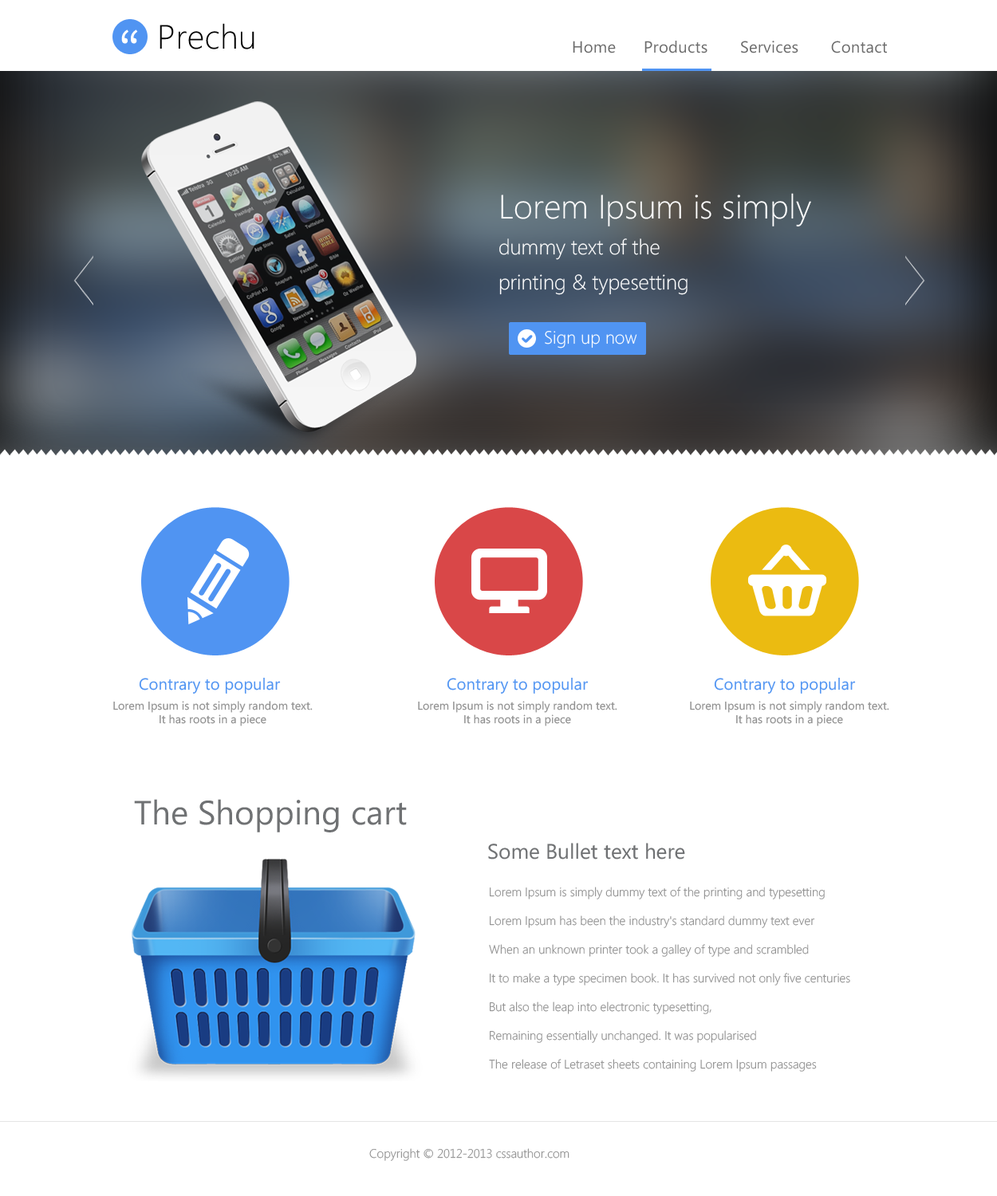
<style>
.page{position:relative;width:997px;height:1196px;background:#ffffff}
.page>*{position:absolute;margin:0}
.t1{font:51.3px "SourceSansPro-Regular";letter-spacing:0.01em;color:#ffffff}
.t2{font:33.8px "SegoeWP-Light";letter-spacing:0.01em;color:#000000}
.t3{font:16.2px "SegoeWPN";letter-spacing:0.01em;color:#6c6c6c}
.t4{font:21px/35.4px "SegoeWP-Light";color:#ffffff}
.t5{font:33.8px/35.4px "SegoeWP-Light";color:#ffffff}
.t6{font:17.8px "SegoeWP-Light";color:#ffffff}
.t7{font:16.2px "SegoeWPN";color:#5094f2}
.t8{font:11.4px "SegoeWPN";color:#909090}
.t9{font:33.8px "SegoeWPN";color:#6f7173}
.t10{font:21px "SegoeWPN";color:#6f7173}
.t11{font:12.2px/28.7px "SegoeWPN-Light";color:#909090}
.t12{font:12.2px "SegoeWPN-Light";color:#909090}
</style>
<div class="page">
<p class="t1" style="left:121px;top:30px;width:17px;height:14px">“</p>
<p class="t2" style="left:159px;top:23px;width:95px;height:26px">Prechu</p>
<p class="t3" style="left:573px;top:41px;width:314px;height:12px">Home      Products       Services       Contact</p>
<p class="t4" style="left:499px;top:193px;width:312px;height:102px"><span class="t5">Lorem Ipsum is simply <br></span>dummy text of the <br>printing &amp; typesetting</p>
<p class="t6" style="left:545px;top:331px;width:92px;height:17px">Sign up now</p>
<p class="t7" style="left:139px;top:678px;width:142px;height:16px">Contrary to popular</p>
<p class="t7" style="left:447px;top:678px;width:142px;height:16px">Contrary to popular</p>
<p class="t7" style="left:714px;top:678px;width:142px;height:16px">Contrary to popular</p>
<p class="t8" style="left:113px;top:701px;width:200px;height:25px;text-align:center">Lorem Ipsum is not simply random text. It has roots in a piece</p>
<p class="t8" style="left:418px;top:701px;width:199px;height:25px;text-align:center">Lorem Ipsum is not simply random text. It has roots in a piece</p>
<p class="t8" style="left:690px;top:701px;width:199px;height:25px;text-align:center">Lorem Ipsum is not simply random text. It has roots in a piece</p>
<p class="t9" style="left:134px;top:799px;width:273px;height:34px">The Shopping cart</p>
<p class="t10" style="left:488px;top:843px;width:197px;height:17px">Some Bullet text here</p>
<p class="t11" style="left:489px;top:887px;width:361px;height:185px">Lorem Ipsum is simply dummy text of the printing and typesetting <br>Lorem Ipsum has been the industry's standard dummy text ever <br>When an unknown printer took a galley of type and scrambled <br>It to make a type specimen book. It has survived not only five centuries<br>But also the leap into electronic typesetting,<br>Remaining essentially unchanged. It was popularised <br>The release of Letraset sheets containing Lorem Ipsum passages</p>
<p class="t12" style="left:369px;top:1148px;width:200px;height:13px">Copyright © 2012-2013 cssauthor.com</p>
</div>
